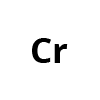
<style>
.page{position:relative;width:100px;height:100px;background:#ffffff}
.page>*{position:absolute;margin:0}
.t1{font:35px "OpenSans-Bold";color:#000000}
</style>
<div class="page">
<p class="t1" style="left:32px;top:38px;width:36px;height:25px">Cr</p>
</div>
